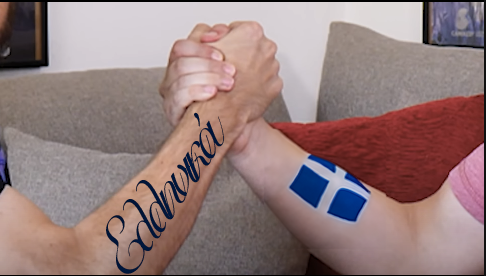
<style>
.page{position:relative;width:486px;height:276px}
.page>*{position:absolute;margin:0}
.t1{font:70.1px "SnellRoundhand";letter-spacing:-0.14em;color:#001539}
</style>
<div class="page">
<p class="t1" style="left:106px;top:112px;width:118px;height:162px;rotate:-56deg">Eλληνικά</p>
</div>
